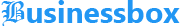
<style>
.page{position:relative;width:180px;height:26px;background:#ffffff}
.page>*{position:absolute;margin:0}
.t1{font:30px "MicrosoftTaiLe-Bold";color:#2196f3}
.t2{font:30px "OldEnglishTextMT";color:#2196f3}
</style>
<div class="page">
<p class="t1" style="left:1px;top:0px;width:179px;height:26px"><span class="t2">B</span>usinessbox</p>
</div>
